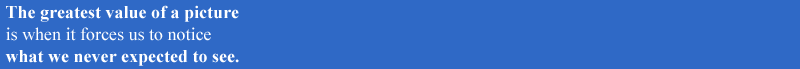
<style>
.page{position:relative;width:800px;height:69px;background:#2f69c6}
.page>*{position:absolute;margin:0}
.t1{font:18px "TimesNewRomanPS-BoldMT";color:#ffffff}
.t2{font:18px "TimesNewRomanPSMT";color:#ffffff}
</style>
<div class="page">
<p class="t1" style="left:5px;top:5px;width:234px;height:61px">The greatest value of a picture <br><span class="t2">is when it forces us to notice <br></span>what we never expected to see.</p>
</div>
